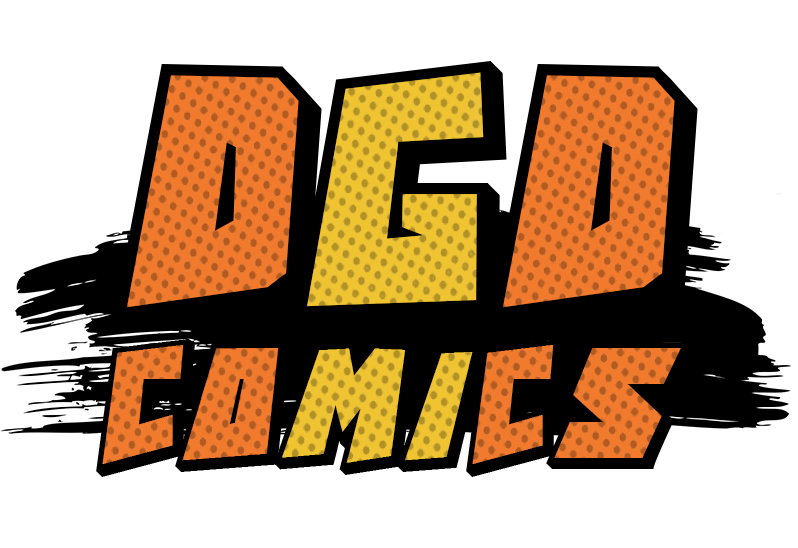
<style>
.page{position:relative;width:798px;height:548px;background:#ffffff}
.page>*{position:absolute;margin:0}
.t1{font:161.7px "ActionComics";color:#000000}
.t2{font:79.3px "ActionComics";color:#000000}
</style>
<div class="page">
<p class="t1" style="left:113px;top:60px;width:585px;height:272px">DGD</p>
<p class="t2" style="left:96px;top:339px;width:596px;height:138px;text-align:center">COMICS</p>
</div>
